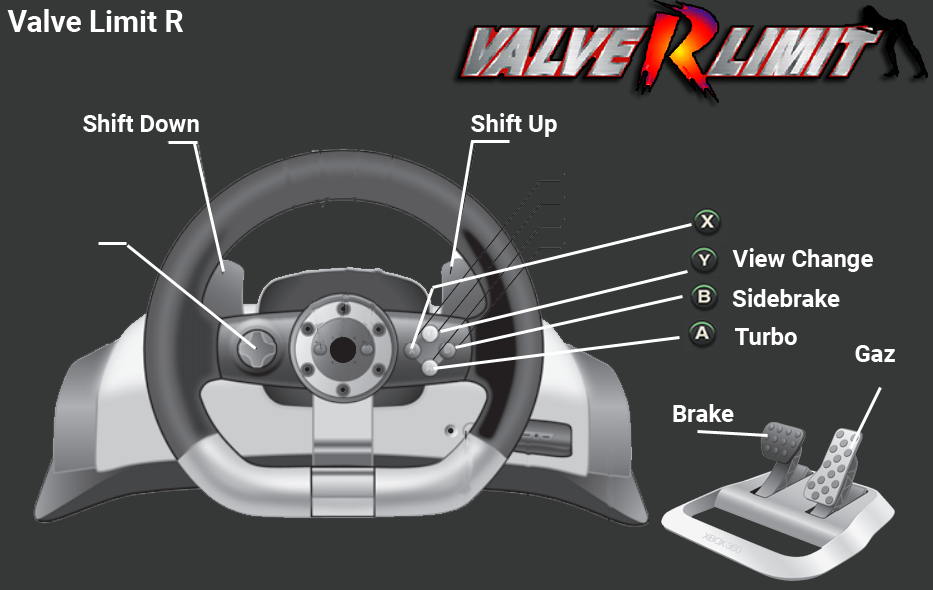
<style>
.page{position:relative;width:933px;height:590px;background:#363838}
.page>*{position:absolute;margin:0}
.t1{font:30px "Roboto-Bold";color:#ffffff}
.t2{font:24px "Roboto-Bold";color:#ffffff}
</style>
<div class="page">
<p class="t1" style="left:7px;top:9px;width:176px;height:23px">Valve Limit R</p>
<p class="t2" style="left:83px;top:113px;width:116px;height:19px">Shift Down</p>
<p class="t2" style="left:471px;top:113px;width:86px;height:24px">Shift Up</p>
<p class="t2" style="left:732px;top:248px;width:141px;height:24px">View Change</p>
<p class="t2" style="left:732px;top:288px;width:108px;height:19px">Sidebrake</p>
<p class="t2" style="left:735px;top:327px;width:62px;height:18px">Turbo</p>
<p class="t2" style="left:855px;top:345px;width:40px;height:17px">Gaz</p>
<p class="t2" style="left:673px;top:404px;width:61px;height:18px">Brake</p>
</div>
